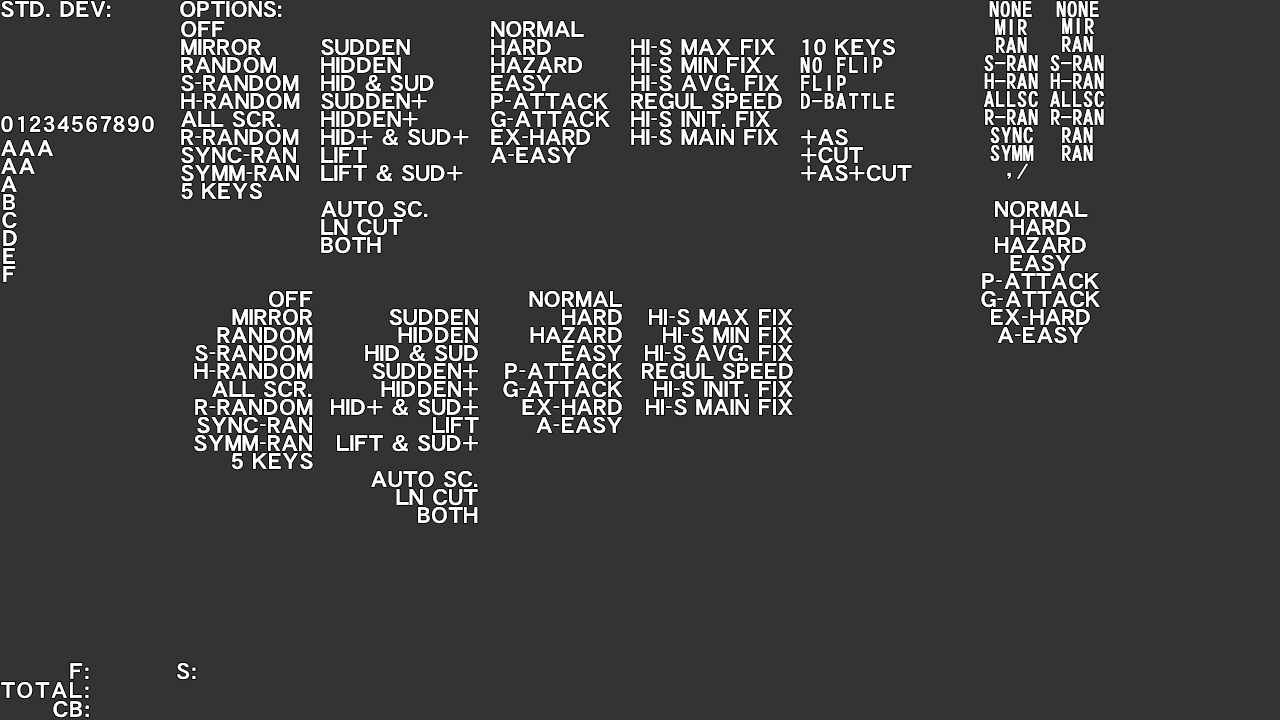
<style>
.page{position:relative;width:1280px;height:720px;background:#333333}
.page>*{position:absolute;margin:0}
.t1{font:22px "DFHSGothic-W7-WING-RKSJ-H";letter-spacing:0.05em;color:#ffffff}
.t2{font:22px "DFHSGothic-W7-WIN-RKSJ-H";color:#ffffff}
.t3{font:22px "DFHSGothic-W7-WIN-RKSJ-H";letter-spacing:0.05em;color:#ffffff}
.t4{font:22px "DFHSGothic-W7-WING-RKSJ-H";letter-spacing:0.1em;color:#ffffff}
.t5{font:16px "DFHSGothicRPro6-W7";color:#ffffff}
</style>
<div class="page">
<p class="t1" style="left:1px;top:1px;width:110px;height:17px">STD. DEV:</p>
<p class="t1" style="left:180px;top:1px;width:102px;height:17px">OPTIONS:</p>
<p class="t2" style="left:989px;top:1px;width:43px;height:17px">NONE</p>
<p class="t2" style="left:1056px;top:1px;width:43px;height:17px">NONE</p>
<p class="t1" style="left:181px;top:21px;width:44px;height:17px">OFF</p>
<p class="t1" style="left:491px;top:21px;width:93px;height:17px">NORMAL</p>
<p class="t2" style="left:995px;top:19px;width:33px;height:16px">MIR</p>
<p class="t2" style="left:1062px;top:18px;width:33px;height:16px">MIR</p>
<p class="t1" style="left:181px;top:39px;width:80px;height:17px">MIRROR</p>
<p class="t1" style="left:321px;top:39px;width:89px;height:17px">SUDDEN</p>
<p class="t1" style="left:491px;top:39px;width:60px;height:16px">HARD</p>
<p class="t1" style="left:631px;top:39px;width:145px;height:17px">HI-S MAX FIX</p>
<p class="t1" style="left:802px;top:39px;width:93px;height:17px">10 KEYS</p>
<p class="t2" style="left:996px;top:37px;width:31px;height:16px">RAN</p>
<p class="t2" style="left:1062px;top:36px;width:31px;height:16px">RAN</p>
<p class="t1" style="left:181px;top:57px;width:95px;height:17px">RANDOM</p>
<p class="t1" style="left:321px;top:57px;width:80px;height:16px">HIDDEN</p>
<p class="t1" style="left:491px;top:57px;width:91px;height:16px">HAZARD</p>
<p class="t1" style="left:631px;top:57px;width:131px;height:17px">HI-S MIN FIX</p>
<p class="t3" style="left:800px;top:57px;width:83px;height:17px">NO FLIP</p>
<p class="t2" style="left:984px;top:55px;width:54px;height:17px">S-RAN</p>
<p class="t2" style="left:1050px;top:55px;width:54px;height:17px">S-RAN</p>
<p class="t1" style="left:181px;top:75px;width:118px;height:17px">S-RANDOM</p>
<p class="t1" style="left:321px;top:75px;width:113px;height:17px">HID &amp; SUD</p>
<p class="t1" style="left:491px;top:75px;width:61px;height:17px">EASY</p>
<p class="t1" style="left:631px;top:75px;width:149px;height:17px">HI-S AVG. FIX</p>
<p class="t3" style="left:801px;top:75px;width:45px;height:16px">FLIP</p>
<p class="t2" style="left:984px;top:73px;width:54px;height:16px">H-RAN</p>
<p class="t2" style="left:1050px;top:73px;width:54px;height:16px">H-RAN</p>
<p class="t1" style="left:181px;top:93px;width:119px;height:17px">H-RANDOM</p>
<p class="t1" style="left:321px;top:93px;width:106px;height:17px">SUDDEN+</p>
<p class="t1" style="left:491px;top:93px;width:117px;height:17px">P-ATTACK</p>
<p class="t1" style="left:631px;top:93px;width:151px;height:17px">REGUL SPEED</p>
<p class="t3" style="left:801px;top:93px;width:94px;height:16px">D-BATTLE</p>
<p class="t2" style="left:984px;top:91px;width:54px;height:17px">ALLSC</p>
<p class="t2" style="left:1050px;top:91px;width:54px;height:17px">ALLSC</p>
<p class="t1" style="left:181px;top:111px;width:100px;height:17px">ALL SCR.</p>
<p class="t1" style="left:321px;top:111px;width:97px;height:16px">HIDDEN+</p>
<p class="t1" style="left:491px;top:111px;width:119px;height:17px">G-ATTACK</p>
<p class="t1" style="left:631px;top:111px;width:140px;height:17px">HI-S INIT. FIX</p>
<p class="t2" style="left:985px;top:109px;width:53px;height:16px">R-RAN</p>
<p class="t2" style="left:1051px;top:109px;width:53px;height:16px">R-RAN</p>
<p class="t1" style="left:181px;top:129px;width:118px;height:17px">R-RANDOM</p>
<p class="t1" style="left:321px;top:129px;width:148px;height:17px">HID+ &amp; SUD+</p>
<p class="t1" style="left:491px;top:129px;width:99px;height:16px">EX-HARD</p>
<p class="t1" style="left:631px;top:129px;width:148px;height:17px">HI-S MAIN FIX</p>
<p class="t1" style="left:801px;top:129px;width:47px;height:17px">+AS</p>
<p class="t2" style="left:990px;top:127px;width:43px;height:17px">SYNC</p>
<p class="t2" style="left:1062px;top:127px;width:31px;height:16px">RAN</p>
<p class="t4" style="left:1px;top:140px;width:52px;height:16px">AAA</p>
<p class="t1" style="left:181px;top:147px;width:115px;height:17px">SYNC-RAN</p>
<p class="t1" style="left:321px;top:147px;width:46px;height:16px">LIFT</p>
<p class="t1" style="left:491px;top:147px;width:86px;height:17px">A-EASY</p>
<p class="t1" style="left:801px;top:147px;width:62px;height:17px">+CUT</p>
<p class="t2" style="left:990px;top:145px;width:44px;height:17px">SYMM</p>
<p class="t2" style="left:1062px;top:145px;width:31px;height:16px">RAN</p>
<p class="t4" style="left:1px;top:158px;width:34px;height:16px">AA</p>
<p class="t1" style="left:181px;top:165px;width:118px;height:17px">SYMM-RAN</p>
<p class="t1" style="left:321px;top:165px;width:142px;height:17px">LIFT &amp; SUD+</p>
<p class="t1" style="left:801px;top:165px;width:111px;height:17px">+AS+CUT</p>
<p class="t2" style="left:1007px;top:172px;width:4px;height:7px">,</p>
<p class="t5" style="left:1017px;top:163px;width:11px;height:16px">/</p>
<p class="t4" style="left:1px;top:176px;width:16px;height:16px">A</p>
<p class="t1" style="left:181px;top:183px;width:81px;height:17px">5 KEYS</p>
<p class="t4" style="left:3px;top:194px;width:12px;height:16px">B</p>
<p class="t1" style="left:321px;top:201px;width:107px;height:17px">AUTO SC.</p>
<p class="t1" style="left:995px;top:201px;width:93px;height:17px">NORMAL</p>
<p class="t4" style="left:2px;top:212px;width:15px;height:17px">C</p>
<p class="t1" style="left:321px;top:219px;width:82px;height:17px">LN CUT</p>
<p class="t1" style="left:1010px;top:219px;width:60px;height:16px">HARD</p>
<p class="t4" style="left:3px;top:230px;width:14px;height:16px">D</p>
<p class="t1" style="left:321px;top:237px;width:60px;height:17px">BOTH</p>
<p class="t1" style="left:995px;top:237px;width:91px;height:16px">HAZARD</p>
<p class="t4" style="left:3px;top:248px;width:12px;height:16px">E</p>
<p class="t1" style="left:1010px;top:255px;width:61px;height:17px">EASY</p>
<p class="t4" style="left:3px;top:266px;width:13px;height:16px">F</p>
<p class="t1" style="left:982px;top:273px;width:117px;height:17px">P-ATTACK</p>
<p class="t1" style="left:269px;top:291px;width:44px;height:17px">OFF</p>
<p class="t1" style="left:529px;top:291px;width:93px;height:17px">NORMAL</p>
<p class="t1" style="left:981px;top:291px;width:119px;height:17px">G-ATTACK</p>
<p class="t1" style="left:232px;top:309px;width:81px;height:17px">MIRROR</p>
<p class="t1" style="left:389px;top:309px;width:89px;height:17px">SUDDEN</p>
<p class="t1" style="left:562px;top:309px;width:60px;height:16px">HARD</p>
<p class="t1" style="left:649px;top:309px;width:144px;height:17px">HI-S MAX FIX</p>
<p class="t1" style="left:991px;top:309px;width:99px;height:16px">EX-HARD</p>
<p class="t1" style="left:217px;top:327px;width:96px;height:17px">RANDOM</p>
<p class="t1" style="left:398px;top:327px;width:80px;height:16px">HIDDEN</p>
<p class="t1" style="left:530px;top:327px;width:92px;height:16px">HAZARD</p>
<p class="t1" style="left:663px;top:327px;width:130px;height:17px">HI-S MIN FIX</p>
<p class="t1" style="left:997px;top:327px;width:87px;height:17px">A-EASY</p>
<p class="t1" style="left:195px;top:345px;width:118px;height:17px">S-RANDOM</p>
<p class="t1" style="left:365px;top:345px;width:113px;height:17px">HID &amp; SUD</p>
<p class="t1" style="left:562px;top:345px;width:60px;height:17px">EASY</p>
<p class="t1" style="left:645px;top:345px;width:148px;height:17px">HI-S AVG. FIX</p>
<p class="t1" style="left:194px;top:363px;width:119px;height:17px">H-RANDOM</p>
<p class="t1" style="left:372px;top:363px;width:106px;height:17px">SUDDEN+</p>
<p class="t1" style="left:505px;top:363px;width:118px;height:17px">P-ATTACK</p>
<p class="t1" style="left:642px;top:363px;width:151px;height:17px">REGUL SPEED</p>
<p class="t1" style="left:212px;top:381px;width:100px;height:17px">ALL SCR.</p>
<p class="t1" style="left:381px;top:381px;width:97px;height:16px">HIDDEN+</p>
<p class="t1" style="left:503px;top:381px;width:120px;height:17px">G-ATTACK</p>
<p class="t1" style="left:654px;top:381px;width:139px;height:17px">HI-S INIT. FIX</p>
<p class="t1" style="left:195px;top:399px;width:118px;height:17px">R-RANDOM</p>
<p class="t1" style="left:331px;top:399px;width:147px;height:17px">HID+ &amp; SUD+</p>
<p class="t1" style="left:522px;top:399px;width:100px;height:16px">EX-HARD</p>
<p class="t1" style="left:646px;top:399px;width:147px;height:17px">HI-S MAIN FIX</p>
<p class="t1" style="left:197px;top:417px;width:115px;height:17px">SYNC-RAN</p>
<p class="t1" style="left:433px;top:417px;width:46px;height:16px">LIFT</p>
<p class="t1" style="left:536px;top:417px;width:86px;height:17px">A-EASY</p>
<p class="t1" style="left:194px;top:435px;width:118px;height:17px">SYMM-RAN</p>
<p class="t1" style="left:337px;top:435px;width:141px;height:17px">LIFT &amp; SUD+</p>
<p class="t1" style="left:232px;top:453px;width:81px;height:17px">5 KEYS</p>
<p class="t1" style="left:371px;top:471px;width:107px;height:17px">AUTO SC.</p>
<p class="t1" style="left:396px;top:489px;width:82px;height:17px">LN CUT</p>
<p class="t1" style="left:418px;top:507px;width:60px;height:17px">BOTH</p>
<p class="t4" style="left:53px;top:701px;width:36px;height:17px">CB:</p>
</div>
